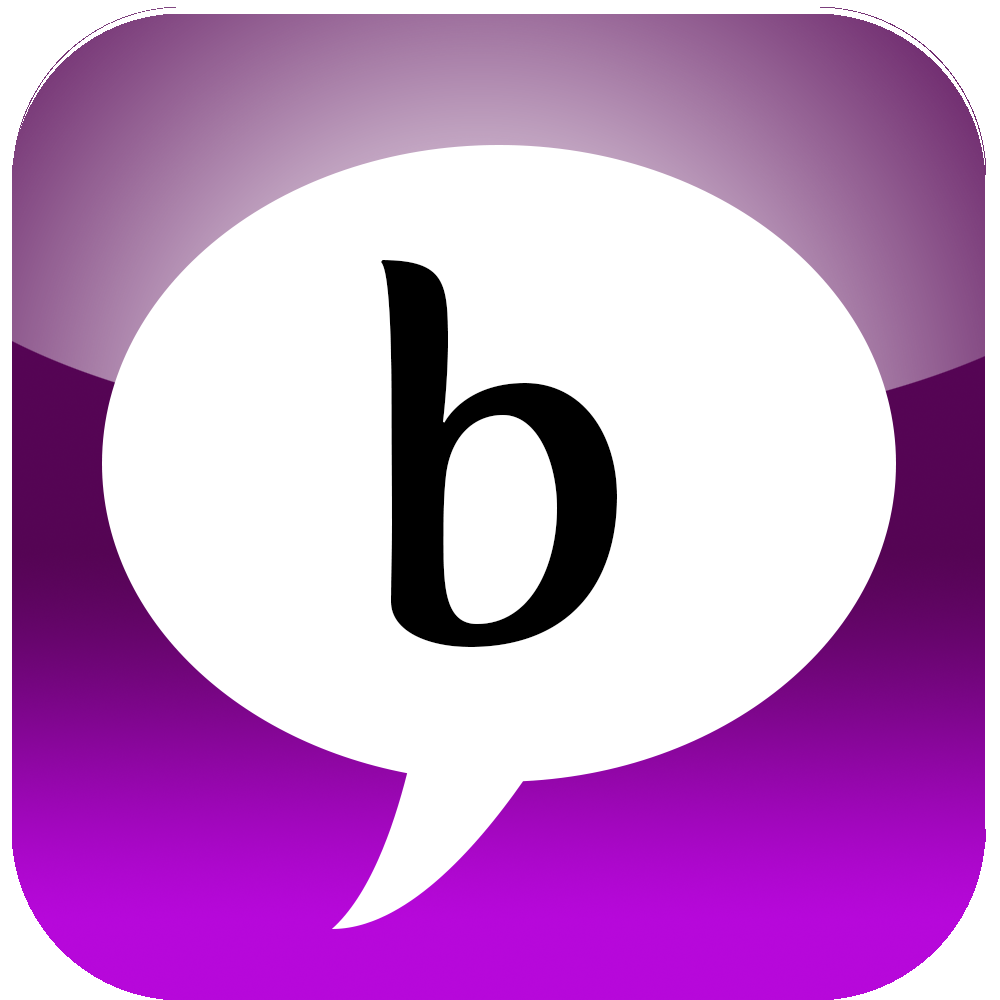
<style>
.page{position:relative;width:1000px;height:1000px;background:#ffffff}
.page>*{position:absolute;margin:0}
.t1{font:500px "FertigoPro-Regular";color:#000000}
</style>
<div class="page">
<p class="t1" style="left:381px;top:260px;width:236px;height:387px">b</p>
</div>
